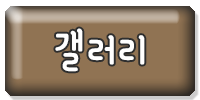
<style>
.page{position:relative;width:200px;height:100px;background:#907353}
.page>*{position:absolute;margin:0}
.t1{font:50px "YanoljaYacheR";color:#ffffff}
</style>
<div class="page">
<p class="t1" style="left:55px;top:28px;width:90px;height:44px">갤러리</p>
</div>
